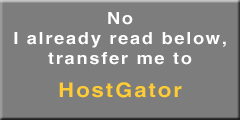
<style>
.page{position:relative;width:240px;height:120px;background:#7d7d7d}
.page>*{position:absolute;margin:0}
.t1{font:16.7px "SwitzerlandBold";letter-spacing:0.1em;color:#ffffff;scale:1.1 1}
.t2{font:20px/16.7px "SwitzerlandBold";letter-spacing:0.1em;color:#ffcc33;scale:1.1 1}
</style>
<div class="page">
<p class="t1" style="left:14px;top:12px;width:212px;height:86px;text-align:center">No<br>I already read below,<br>transfer me to<br><br><span class="t2">HostGator</span></p>
</div>
